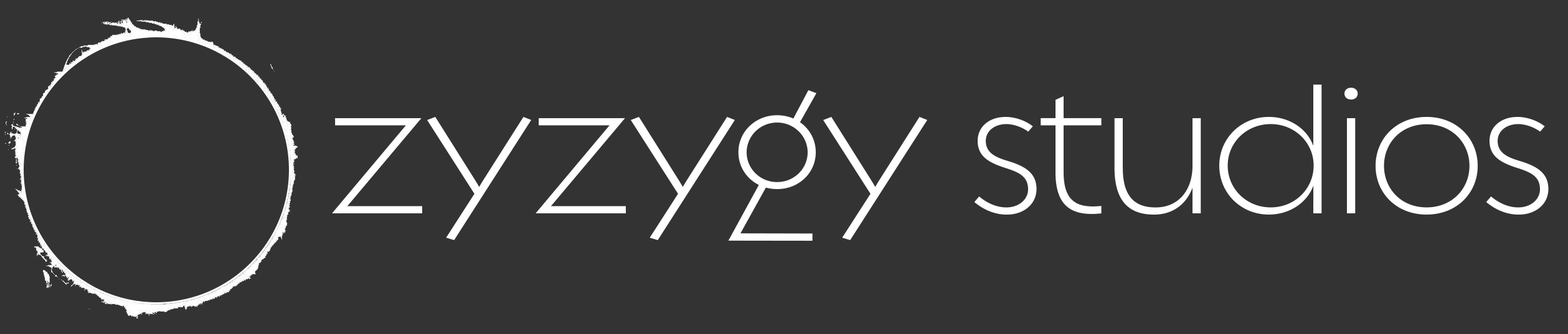
<style>
.page{position:relative;width:1568px;height:334px;background:#333333}
.page>*{position:absolute;margin:0}
.t1{font:188.8px "RegulatorNova-Light";letter-spacing:-0.02em;color:#ffffff}
</style>
<div class="page">
<p class="t1" style="left:332px;top:85px;width:1217px;height:157px">zyzygy studios</p>
</div>
